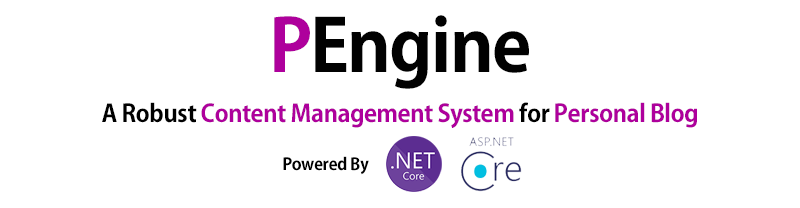
<style>
.page{position:relative;width:800px;height:208px;background:#ffffff}
.page>*{position:absolute;margin:0}
.t1{font:72px "AdobeGothicStd-Bold";letter-spacing:-0.025em;color:#010101}
.t2{font:72px "AdobeGothicStd-Bold";letter-spacing:-0.025em;color:#ae009c}
.t3{font:24px "AdobeGothicStd-Bold";letter-spacing:-0.025em;color:#ae009c}
.t4{font:24px "AdobeGothicStd-Bold";letter-spacing:-0.025em;color:#000000}
.t5{font:16.6px "AdobeGothicStd-Bold";letter-spacing:-0.025em;color:#000000}
</style>
<div class="page">
<p class="t1" style="left:274px;top:15px;width:255px;height:74px"><span class="t2">P</span>Engine</p>
<p class="t3" style="left:102px;top:102px;width:595px;height:26px"><span class="t4">A Robust </span>Content Management System<span class="t4"> for </span>Personal Blog</p>
<p class="t5" style="left:283px;top:156px;width:86px;height:19px">Powered By</p>
</div>
